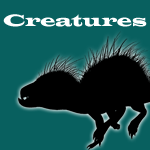
<style>
.page{position:relative;width:150px;height:150px;background:#08605f}
.page>*{position:absolute;margin:0}
.t1{font:17px "LatinWide";color:#ffffff}
</style>
<div class="page">
<p class="t1" style="left:3px;top:14px;width:144px;height:13px">Creatures</p>
</div>
